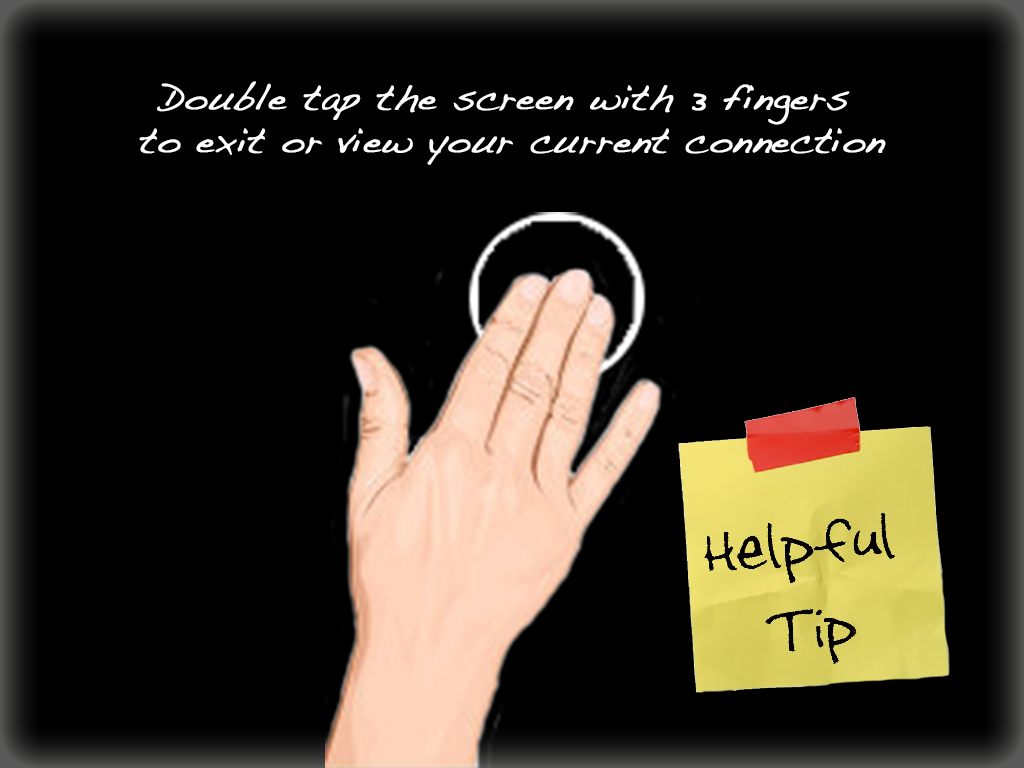
<style>
.page{position:relative;width:1024px;height:768px;background:#000000}
.page>*{position:absolute;margin:0}
.t1{font:36px "Handwriting-Dakota";color:#ffffff;font-weight:bold}
</style>
<div class="page">
<p class="t1" style="left:139px;top:81px;width:747px;height:84px;text-align:center">Double tap the screen with 3 fingers <br>to exit or view your current connection</p>
</div>
